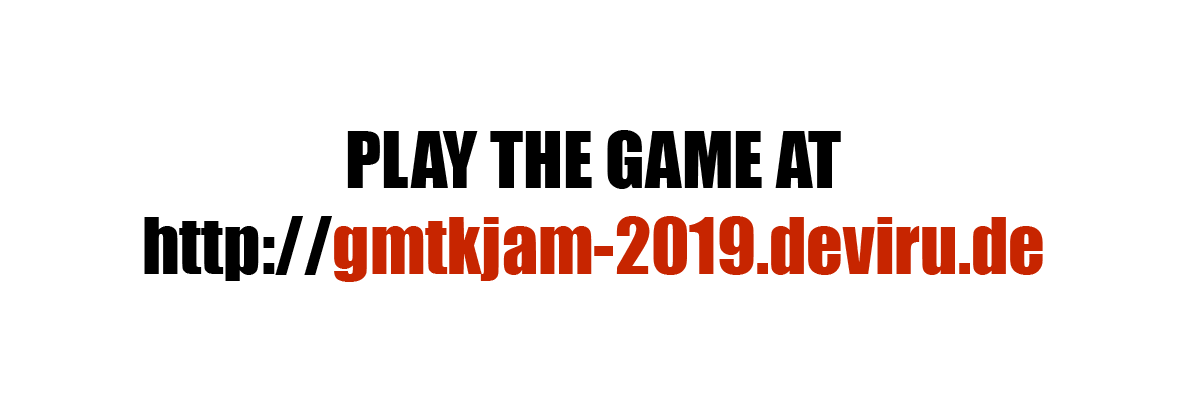
<style>
.page{position:relative;width:1187px;height:395px;background:#ffffff}
.page>*{position:absolute;margin:0}
.t1{font:72px "Impact";color:#000000}
.t2{font:72px "Impact";color:#c72500}
</style>
<div class="page">
<p class="t1" style="left:144px;top:130px;width:899px;height:152px;text-align:center">PLAY THE GAME AT<br>http://<span class="t2">gmtkjam-2019.deviru.de</span></p>
</div>
